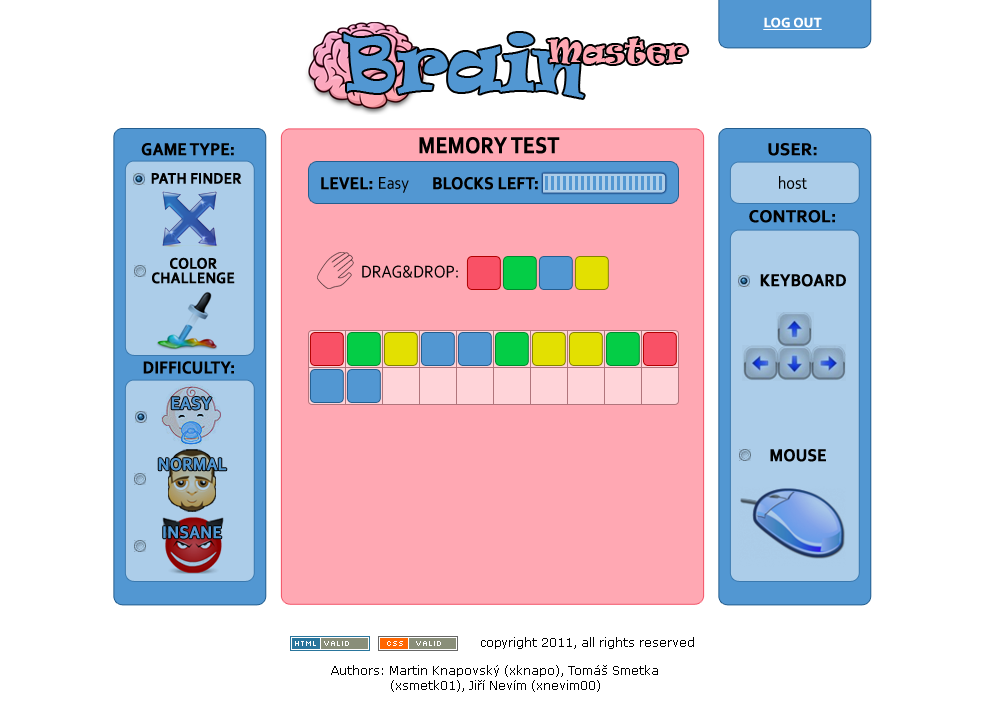
<style>
.page{position:relative;width:1000px;height:716px;background:#ffffff}
.page>*{position:absolute;margin:0}
.t1{font:14px "Corbel-Bold";color:#ffffff;text-transform:uppercase;font-weight:bold;text-decoration:underline}
.t2{font:72px "Ravie";color:#5297d2;scale:0.9 1}
.t3{font:30px "Ravie";color:#ffa8b3;scale:0.9 1}
.t4{font:24px "Corbel-Bold";color:#000000;text-transform:uppercase;font-weight:bold;scale:0.85 1}
.t5{font:18px "Corbel-Bold";color:#000000;text-transform:uppercase;font-weight:bold;scale:0.9 1}
.t6{font:18px "Corbel-Bold";color:#000000;text-transform:uppercase;font-weight:bold}
.t7{font:16px "Corbel-Bold";color:#000000;text-transform:uppercase;font-weight:bold;scale:0.9 1}
.t8{font:18px "Corbel";color:#000000;scale:0.9 1}
.t9{font:16px/7.2px "Corbel-Bold";color:#000000;text-transform:uppercase;font-weight:bold;scale:0.9 1}
.t10{font:18px "Corbel-Bold";color:#5297d2;text-transform:uppercase;font-weight:bold;scale:0.9 1}
.t11{font:12px "Verdana";color:#000000}
</style>
<div class="page">
<p class="t1" style="left:763px;top:17px;width:59px;height:13px">LOG OUT</p>
<p class="t2" style="left:343px;top:33px;width:241px;height:65px">Brain</p>
<p class="t3" style="left:547px;top:38px;width:141px;height:26px">Master</p>
<p class="t4" style="left:419px;top:137px;width:141px;height:17px">Memory test</p>
<p class="t5" style="left:141px;top:143px;width:93px;height:13px">GAME TYPE:</p>
<p class="t6" style="left:768px;top:143px;width:49px;height:13px">USER:</p>
<p class="t7" style="left:151px;top:173px;width:91px;height:11px">PAth finder</p>
<p class="t5" style="left:321px;top:177px;width:52px;height:13px">Level:</p>
<p class="t8" style="left:379px;top:177px;width:30px;height:16px">Easy</p>
<p class="t5" style="left:433px;top:177px;width:105px;height:13px">Blocks LEFT:</p>
<p class="t8" style="left:779px;top:176px;width:28px;height:13px">host</p>
<p class="t6" style="left:749px;top:210px;width:86px;height:13px">control:</p>
<p class="t9" style="left:152px;top:257px;width:83px;height:27px;text-align:center">Color <br><br>Challenge</p>
<p class="t8" style="left:362px;top:265px;width:96px;height:13px">DRAG&amp;DROP:</p>
<p class="t5" style="left:760px;top:274px;width:86px;height:13px">Keyboard</p>
<p class="t5" style="left:143px;top:361px;width:91px;height:13px">difficulty:</p>
<p class="t10" style="left:171px;top:397px;width:41px;height:13px">easy</p>
<p class="t5" style="left:770px;top:449px;width:56px;height:13px">Mouse</p>
<p class="t10" style="left:158px;top:458px;width:69px;height:13px">Normal</p>
<p class="t10" style="left:163px;top:526px;width:59px;height:13px">INSANE</p>
<p class="t11" style="left:481px;top:637px;width:213px;height:12px">copyright 2011, all rights reserved</p>
<p class="t11" style="left:331px;top:665px;width:327px;height:27px;text-align:center">Authors: Martin Knapovský (xknapo), Tomáš Smetka (xsmetk01), Jiří Nevím (xnevim00)</p>
</div>
